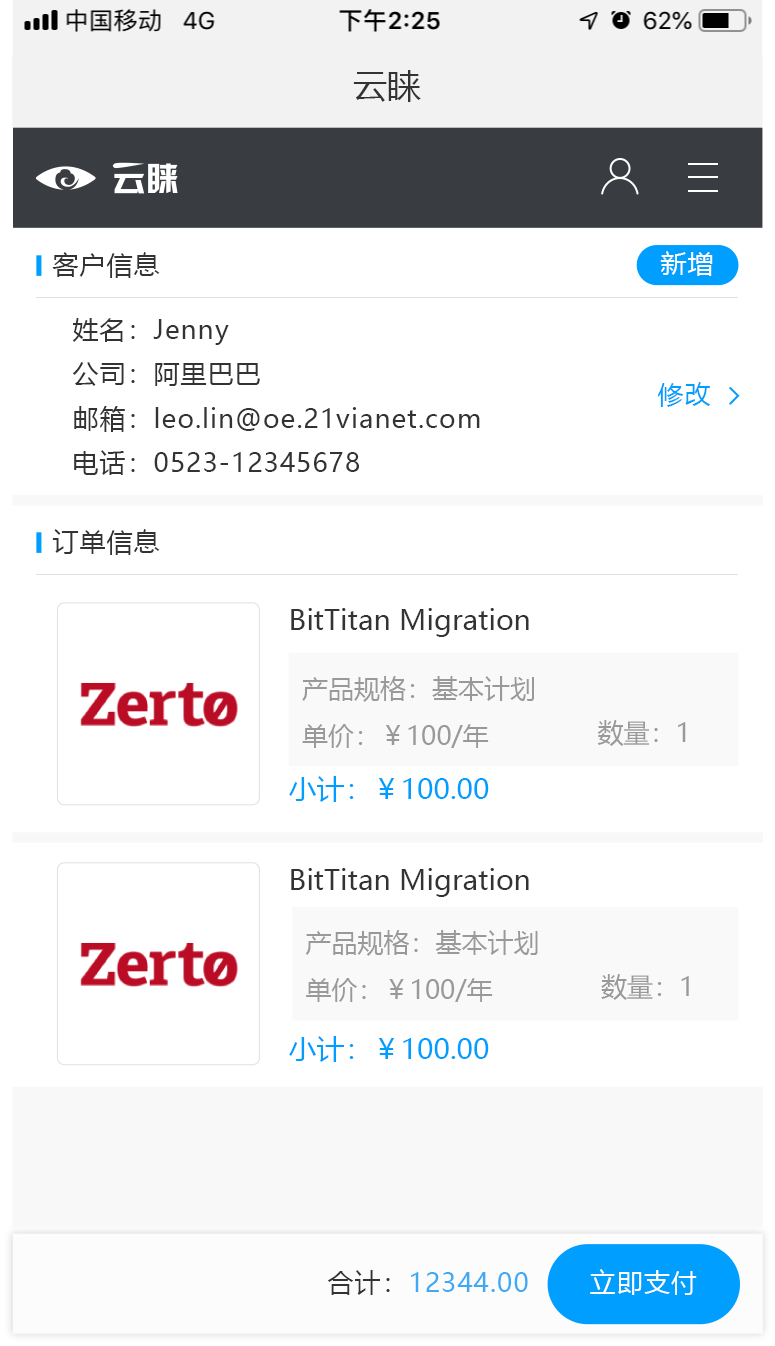
<style>
.page{position:relative;width:775px;height:1346px;background:#ffffff}
.page>*{position:absolute;margin:0}
.t1{font:34px "MicrosoftYaHei";color:#333333}
.t2{font:26px "MicrosoftYaHei";letter-spacing:0.04em;color:#333333}
.t3{font:26px "MicrosoftYaHei";letter-spacing:0.04em;color:#ffffff}
.t4{font:26px "MicrosoftYaHei";letter-spacing:0.04em;color:#009eff}
.t5{font:28px "MicrosoftYaHei";color:#333333}
.t6{font:26px "MicrosoftYaHei";color:#999999}
.t7{font:28px "MicrosoftYaHei";color:#009eff}
.t8{font:26px "MicrosoftYaHei";letter-spacing:0.04em;color:#3fa9f5}
</style>
<div class="page">
<p class="t1" style="left:353px;top:70px;width:68px;height:32px">云睐</p>
<p class="t2" style="left:52px;top:252px;width:108px;height:26px">客户信息</p>
<p class="t3" style="left:660px;top:251px;width:53px;height:25px">新增</p>
<p class="t2" style="left:72px;top:318px;width:157px;height:27px">姓名：Jenny</p>
<p class="t2" style="left:72px;top:362px;width:188px;height:24px">公司：阿里巴巴</p>
<p class="t4" style="left:657px;top:382px;width:54px;height:25px">修改</p>
<p class="t2" style="left:74px;top:406px;width:406px;height:26px">邮箱：leo.lin@oe.21vianet.com</p>
<p class="t2" style="left:74px;top:450px;width:285px;height:25px">电话：0523-12345678</p>
<p class="t2" style="left:52px;top:529px;width:108px;height:26px">订单信息</p>
<p class="t5" style="left:291px;top:608px;width:238px;height:29px">BitTitan Migration</p>
<p class="t6" style="left:302px;top:676px;width:232px;height:26px">产品规格：基本计划</p>
<p class="t6" style="left:302px;top:724px;width:187px;height:24px">单价：￥100/年</p>
<p class="t6" style="left:597px;top:720px;width:89px;height:26px">数量：1</p>
<p class="t7" style="left:289px;top:776px;width:200px;height:26px">小计：￥100.00</p>
<p class="t5" style="left:291px;top:868px;width:238px;height:29px">BitTitan Migration</p>
<p class="t6" style="left:305px;top:930px;width:233px;height:26px">产品规格：基本计划</p>
<p class="t6" style="left:601px;top:974px;width:88px;height:26px">数量：1</p>
<p class="t6" style="left:306px;top:978px;width:187px;height:24px">单价：￥100/年</p>
<p class="t7" style="left:289px;top:1036px;width:200px;height:26px">小计：￥100.00</p>
<p class="t8" style="left:327px;top:1270px;width:201px;height:25px"><span class="t2">合计：</span>12344.00</p>
<p class="t3" style="left:590px;top:1269px;width:107px;height:26px">立即支付</p>
</div>
